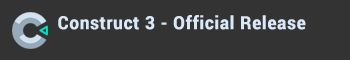
<style>
.page{position:relative;width:350px;height:60px;background:#333333}
.page>*{position:absolute;margin:0}
.t1{font:18px "Roboto-Bold";letter-spacing:0.025em;color:#dae8f7;font-weight:bold;scale:0.94 1}
</style>
<div class="page">
<p class="t1" style="left:58px;top:15px;width:248px;height:15px">Construct 3 - Official Release</p>
</div>
